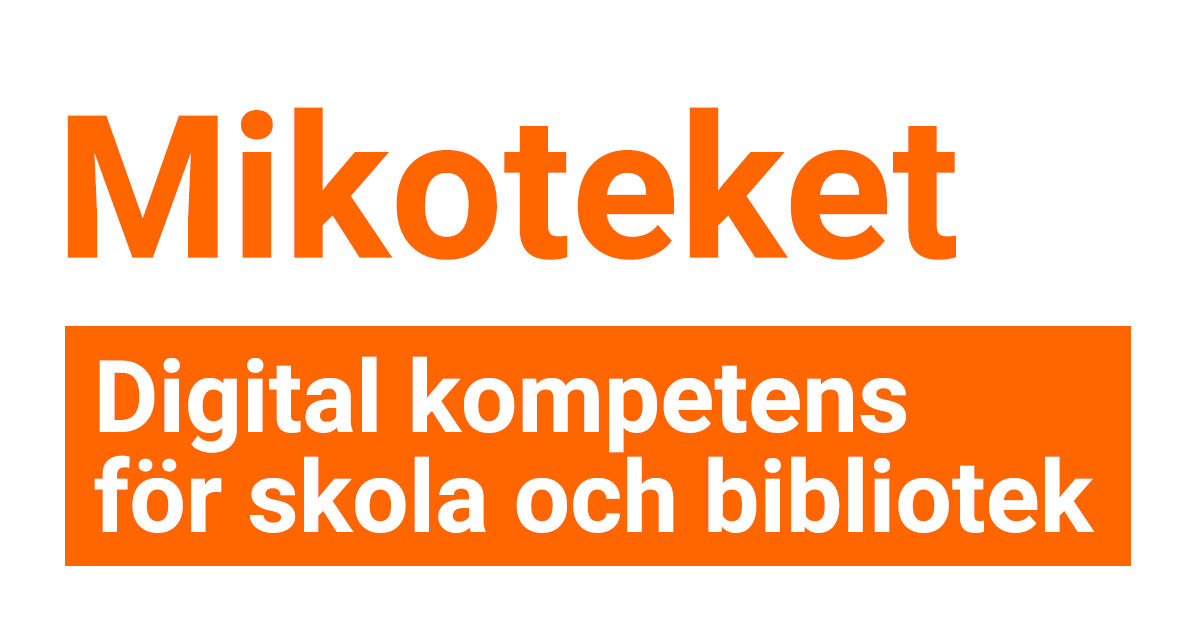
<style>
.page{position:relative;width:1200px;height:630px;background:#ffffff}
.page>*{position:absolute;margin:0}
.t1{font:200px "Roboto-Bold";color:#ff6600}
.t2{font:100px/100px "Roboto-Bold";color:#ffffff}
</style>
<div class="page">
<p class="t1" style="left:67px;top:107px;width:889px;height:153px">Mikoteket</p>
<p class="t2" style="left:94px;top:356px;width:1001px;height:177px">Digital kompetens<br>för skola och bibliotek</p>
</div>
